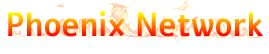
<style>
.page{position:relative;width:269px;height:54px;background:#ffffff}
.page>*{position:absolute;margin:0}
.t1{font:33.5px "Alef-Bold";scale:0.91 1}
</style>
<div class="page">
<p class="t1" style="left:8px;top:10px;width:255px;height:27px">Phoenix Network</p>
</div>
